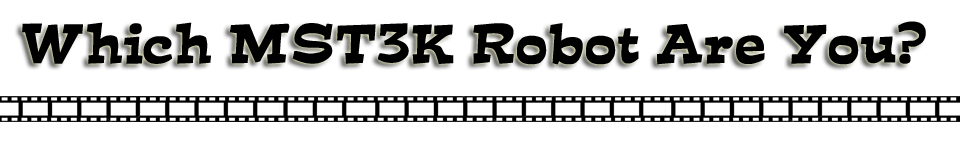
<style>
.page{position:relative;width:960px;height:146px;background:#ffffff}
.page>*{position:absolute;margin:0}
.t1{font:50px "d......";color:#000000;font-weight:bold}
</style>
<div class="page">
<p class="t1" style="left:22px;top:21px;width:904px;height:44px">Which MST3K Robot Are You?</p>
</div>
